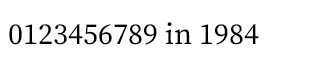
<style>
.page{position:relative;width:320px;height:64px;background:#ffffff}
.page>*{position:absolute;margin:0}
.t1{font:30px "SourceSerifRoman-Regular";color:#000000}
</style>
<div class="page">
<p class="t1" style="left:9px;top:22px;width:250px;height:23px">0123456789 in 1984</p>
</div>
